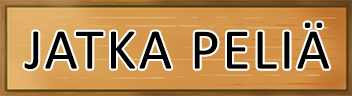
<style>
.page{position:relative;width:352px;height:96px}
.page>*{position:absolute;margin:0}
.t1{font:58px "Calibri";letter-spacing:0.04em;color:#000000}
</style>
<div class="page">
<p class="t1" style="left:24px;top:22px;width:306px;height:48px">JATKA PELIÄ</p>
</div>
